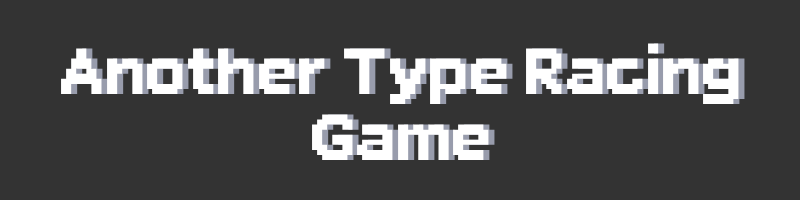
<style>
.page{position:relative;width:800px;height:200px;background:#333333}
.page>*{position:absolute;margin:0}
.t1{font:55.6px "Ari-W9500Display";color:#ffffff}
</style>
<div class="page">
<p class="t1" style="left:61px;top:43px;width:678px;height:117px;text-align:center">Another Type Racing<br>Game</p>
</div>
